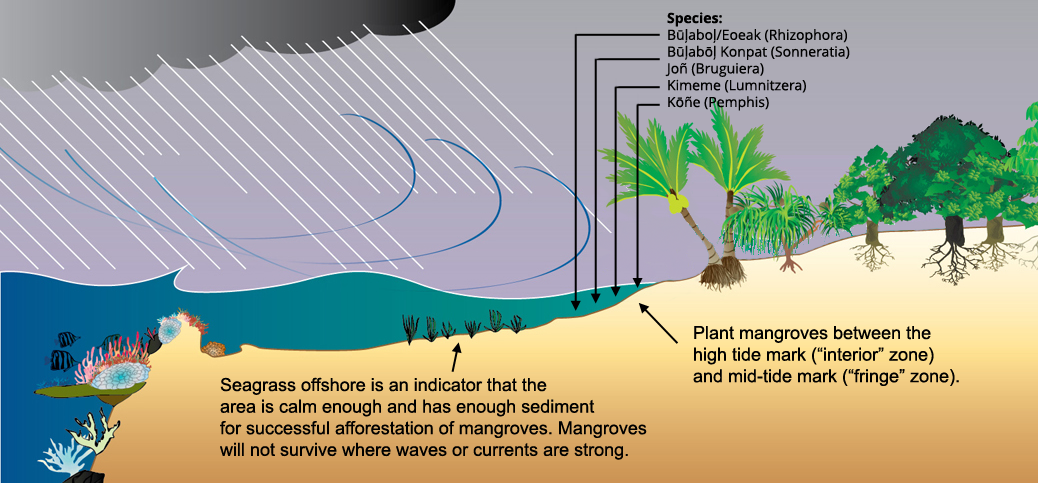
<style>
.page{position:relative;width:1038px;height:483px}
.page>*{position:absolute;margin:0}
.t1{font:14px "OpenSans";color:#000000}
.t2{font:14px "OpenSans-Bold";color:#000000}
.t3{font:18px "ArialMT";color:#000000}
</style>
<div class="page">
<p class="t1" style="left:665px;top:12px;width:185px;height:99px"><span class="t2">Species:<br></span>Būļaboļ/Eoeak (Rhizophora)<br>Būļabōļ Konpat (Sonneratia)<br>Joñ (Bruguiera)<br>Kimeme (Lumnitzera)<br>Kōñe (Pemphis)</p>
<p class="t3" style="left:693px;top:326px;width:266px;height:60px">Plant mangroves between the <br>high tide mark (“interior” zone) <br>and mid-tide mark (“fringe” zone).</p>
<p class="t3" style="left:220px;top:377px;width:427px;height:83px">Seagrass offshore is an indicator that the <br>area is calm enough and has enough sediment <br>for successful afforestation of mangroves. Mangroves <br>will not survive where waves or currents are strong.</p>
</div>
